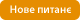
<style>
.page{position:relative;width:80px;height:20px;background:#e68d00}
.page>*{position:absolute;margin:0}
.t1{font:11px "MyriadPro-Semibold";color:#ffffff}
</style>
<div class="page">
<p class="t1" style="left:10px;top:5px;width:61px;height:8px">Новe питанє</p>
</div>
